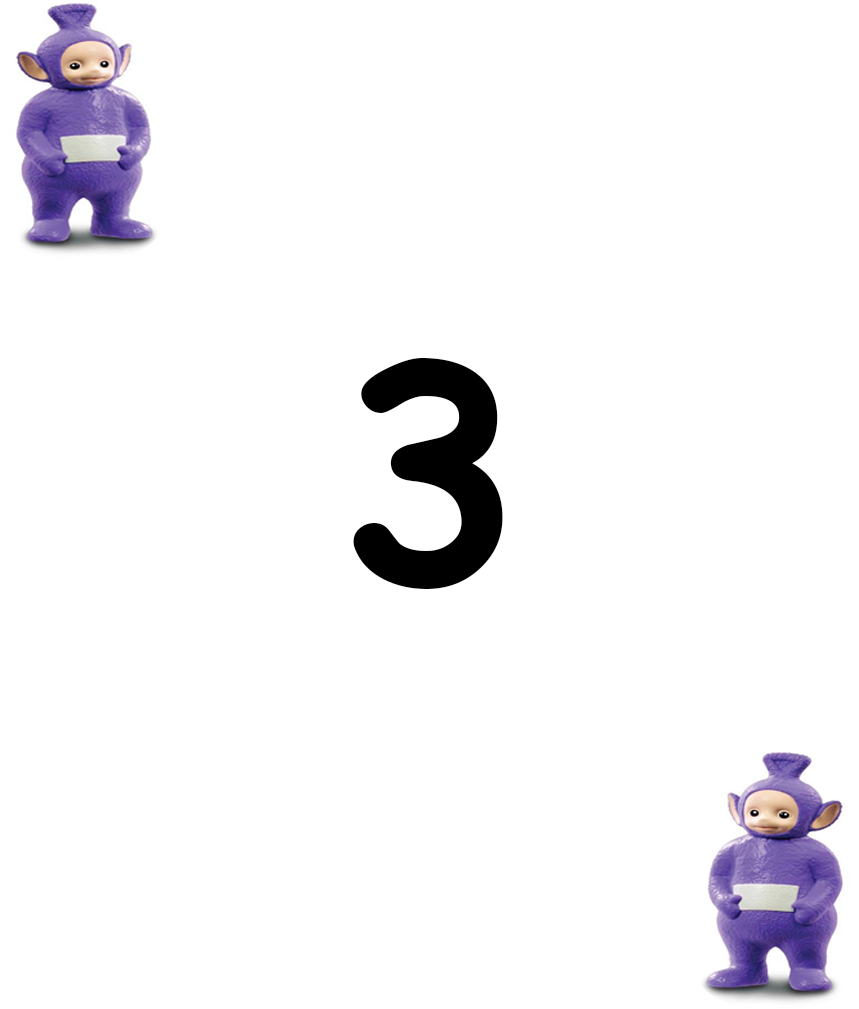
<style>
.page{position:relative;width:859px;height:1009px;background:#ffffff}
.page>*{position:absolute;margin:0}
.t1{font:300px "ComicSansMS-Bold";color:#000000;font-variant:small-caps}
</style>
<div class="page">
<p class="t1" style="left:353px;top:358px;width:150px;height:231px">3</p>
</div>
